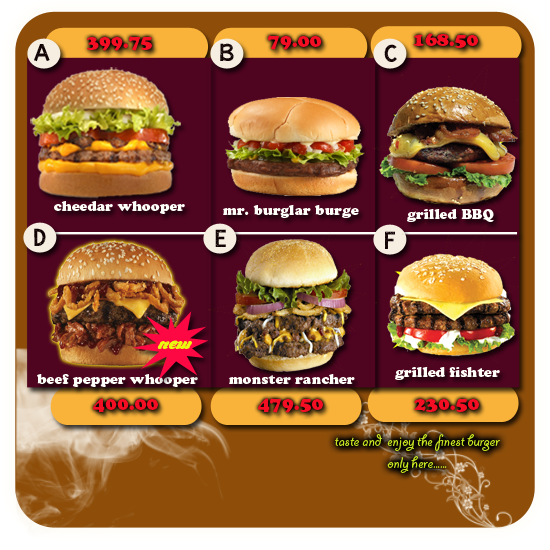
<style>
.page{position:relative;width:550px;height:550px}
.page>*{position:absolute;margin:0}
.t1{font:18.9px "CooperBlackStd";color:#f30e24}
.t2{font:18px "KGColdCoffee";color:#110203}
.t3{font:14px "CooperBlackStd";color:#fefff9}
.t4{font:24px "ChocolateDealer-Bold";color:#eaf811}
.t5{font:18px "GiddyupStd";color:#c5e320}
</style>
<div class="page">
<p class="t1" style="left:87px;top:36px;width:65px;height:15px">399.75</p>
<p class="t1" style="left:268px;top:35px;width:54px;height:15px">79.00</p>
<p class="t1" style="left:413px;top:33px;width:65px;height:15px">168.50</p>
<p class="t2" style="left:34px;top:44px;width:16px;height:18px">A</p>
<p class="t2" style="left:220px;top:43px;width:14px;height:18px">B</p>
<p class="t2" style="left:384px;top:44px;width:13px;height:18px">C</p>
<p class="t3" style="left:54px;top:201px;width:131px;height:13px">cheedar whooper</p>
<p class="t3" style="left:223px;top:205px;width:136px;height:13px">mr. burglar burge</p>
<p class="t3" style="left:407px;top:209px;width:87px;height:13px">grilled BBQ</p>
<p class="t2" style="left:34px;top:228px;width:12px;height:18px">D</p>
<p class="t2" style="left:215px;top:229px;width:11px;height:18px">E</p>
<p class="t2" style="left:385px;top:231px;width:10px;height:18px">F</p>
<p class="t4" style="left:157px;top:340px;width:35px;height:9px">new</p>
<p class="t3" style="left:37px;top:374px;width:161px;height:13px">beef pepper whooper</p>
<p class="t3" style="left:229px;top:374px;width:126px;height:10px">monster rancher</p>
<p class="t3" style="left:395px;top:367px;width:105px;height:13px">grilled fishter</p>
<p class="t1" style="left:93px;top:398px;width:65px;height:14px">400.00</p>
<p class="t1" style="left:258px;top:398px;width:65px;height:15px">479.50</p>
<p class="t1" style="left:414px;top:399px;width:65px;height:13px">230.50</p>
<p class="t5" style="left:335px;top:434px;width:165px;height:39px;text-align:center">taste and  enjoy the finest burger<br>only here......</p>
</div>
